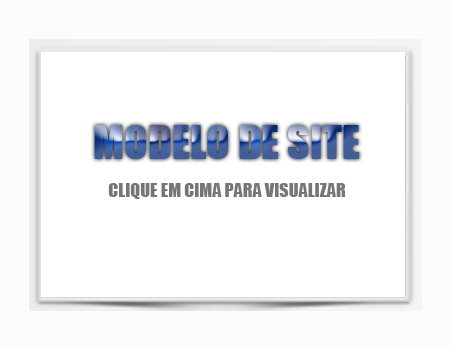
<style>
.page{position:relative;width:450px;height:350px;background:#ffffff}
.page>*{position:absolute;margin:0}
.t1{font:43.3px "Impact"}
.t2{font:18px "Impact";color:#757677}
</style>
<div class="page">
<p class="t1" style="left:94px;top:125px;width:266px;height:34px">MODELO DE SITE</p>
<p class="t2" style="left:108px;top:183px;width:237px;height:16px">CLIQUE EM CIMA PARA VISUALIZAR</p>
</div>
